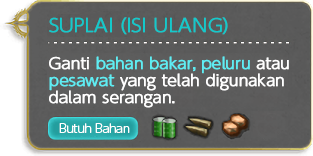
<style>
.page{position:relative;width:313px;height:156px}
.page>*{position:absolute;margin:0}
.t1{font:15px/30px "UDShinGoPro-Light";color:#ffffff;font-weight:bold}
.t2{font:18px/40px "UDShinGoPro-Light";color:#14c9cb;font-weight:bold}
.t3{font:15px/40px "UDShinGoPro-Light";color:#ffffff;font-weight:bold}
.t4{font:15px/40px "UDShinGoPro-Light";color:#5eedf3;font-weight:bold}
.t5{font:15px/30px "UDShinGoPro-Light";color:#5eedf3;font-weight:bold}
.t6{font:12px "UDShinGoPro-Light";letter-spacing:-0.04em;color:#ffffff}
</style>
<div class="page">
<p class="t1" style="left:49px;top:17px;width:240px;height:91px"><span class="t2">SUPLAI (ISI ULANG)<br></span><span class="t3">Ganti </span><span class="t4">bahan bakar, peluru </span>atau<br><span class="t5">pesawat </span>yang telah digunakan<br>dalam serangan.</p>
<p class="t6" style="left:59px;top:123px;width:71px;height:10px">Butuh Bahan</p>
</div>
